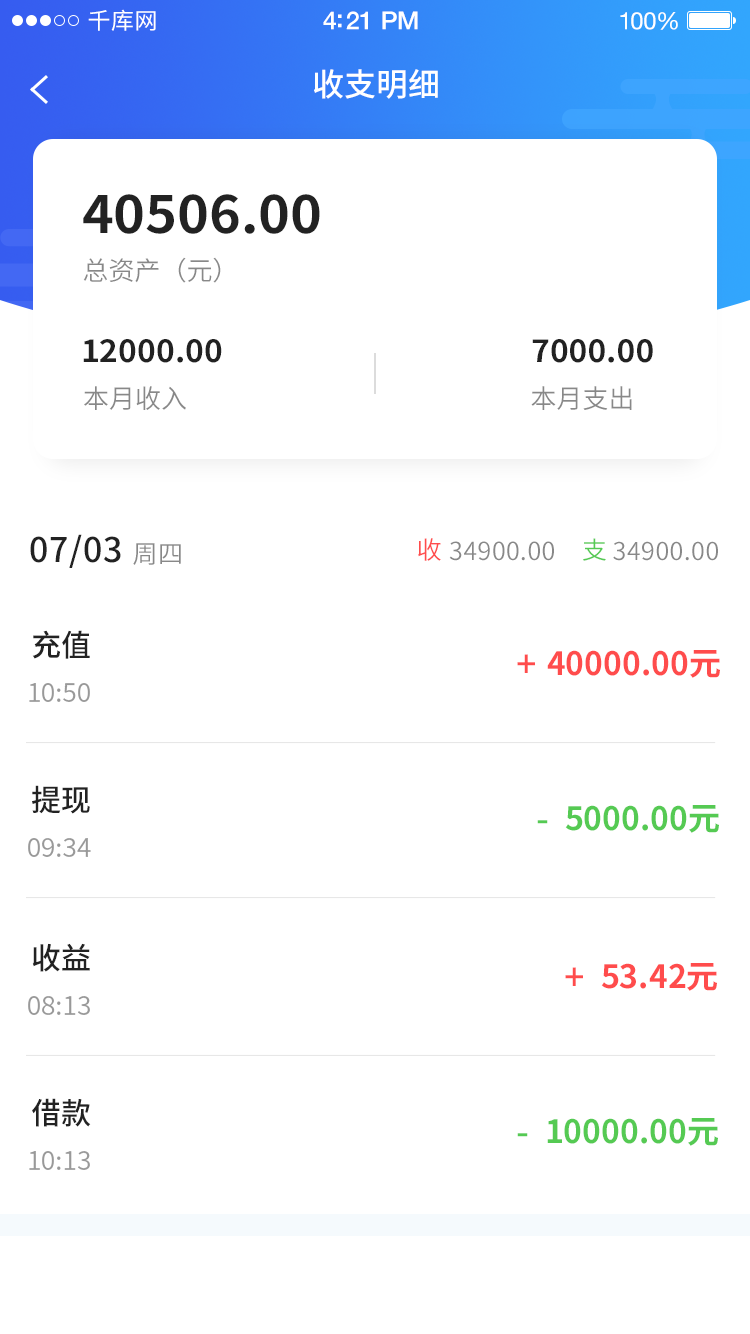
<style>
.page{position:relative;width:750px;height:1334px;background:#ffffff}
.page>*{position:absolute;margin:0}
.t1{font:23px "SourceHanSansCN-Regular";letter-spacing:0.02em;color:#ffffff}
.t2{font:25px "HelveticaNeue-Medium";letter-spacing:-0.02em;color:#ffffff}
.t3{font:24px "HelveticaNeue";letter-spacing:-0.02em;color:#ffffff}
.t4{font:32px "SourceHanSansCN-Medium";color:#ffffff}
.t5{font:51.3px "SourceHanSansCN-Bold";color:#222222;scale:1.05 1}
.t6{font:26px "SourceHanSansCN-Normal";color:#888888}
.t7{font:30.4px "SourceHanSansCN-Bold";color:#222222;scale:1.05 1}
.t8{font:34px "SourceHanSansCN-Medium";letter-spacing:0.02em;color:#222222}
.t9{font:25px "SourceHanSansCN-Normal";letter-spacing:0.02em;color:#888888}
.t10{font:25px "SourceHanSansCN-Normal";letter-spacing:0.02em;color:#ff4c4c}
.t11{font:24.7px "SourceHanSansCN-Normal";letter-spacing:0.02em;color:#55ca53}
.t12{font:24.7px "SourceHanSansCN-Normal";letter-spacing:0.02em;color:#888888}
.t13{font:30px "SourceHanSansCN-Medium";color:#222222}
.t14{font:36px "SourceHanSansCN-Medium";color:#ff4c4c}
.t15{font:32px "SourceHanSansCN-Bold";color:#ff4c4c}
.t16{font:26px "SourceHanSansCN-Normal";color:#999999}
.t17{font:32.1px "SourceHanSansCN-Bold";color:#55ca53}
.t18{font:36.1px "SourceHanSansCN-Medium";color:#55ca53}
.t19{font:30.1px "SourceHanSansCN-Medium";color:#222222}
.t20{font:26.1px "SourceHanSansCN-Normal";color:#999999}
</style>
<div class="page">
<p class="t1" style="left:88px;top:9px;width:68px;height:22px">千库网</p>
<p class="t2" style="left:323px;top:11px;width:95px;height:19px">4:21 PM</p>
<p class="t3" style="left:620px;top:12px;width:58px;height:18px">100%</p>
<p class="t4" style="left:314px;top:69px;width:124px;height:30px">收支明细</p>
<p class="t5" style="left:83px;top:194px;width:237px;height:40px">40506.00</p>
<p class="t6" style="left:83px;top:257px;width:138px;height:26px">总资产（元）</p>
<p class="t7" style="left:83px;top:339px;width:139px;height:24px">12000.00</p>
<p class="t7" style="left:532px;top:339px;width:121px;height:24px">7000.00</p>
<p class="t6" style="left:84px;top:386px;width:102px;height:24px">本月收入</p>
<p class="t6" style="left:531px;top:386px;width:101px;height:24px">本月支出</p>
<p class="t8" style="left:30px;top:534px;width:91px;height:34px">07/03</p>
<p class="t9" style="left:133px;top:543px;width:48px;height:22px">周四</p>
<p class="t10" style="left:418px;top:538px;width:23px;height:23px">收</p>
<p class="t9" style="left:449px;top:541px;width:105px;height:20px">34900.00</p>
<p class="t11" style="left:583px;top:538px;width:23px;height:23px">支</p>
<p class="t12" style="left:613px;top:541px;width:105px;height:20px">34900.00</p>
<p class="t13" style="left:32px;top:630px;width:58px;height:29px">充值</p>
<p class="t14" style="left:517px;top:654px;width:18px;height:19px">+</p>
<p class="t15" style="left:547px;top:650px;width:173px;height:28px">40000.00元</p>
<p class="t16" style="left:29px;top:683px;width:61px;height:19px">10:50</p>
<p class="t13" style="left:32px;top:785px;width:58px;height:29px">提现</p>
<p class="t17" style="left:565px;top:805px;width:154px;height:28px">5000.00元</p>
<p class="t18" style="left:537px;top:820px;width:11px;height:4px">-</p>
<p class="t16" style="left:28px;top:838px;width:63px;height:19px">09:34</p>
<p class="t13" style="left:32px;top:943px;width:58px;height:29px">收益</p>
<p class="t15" style="left:601px;top:963px;width:116px;height:28px">53.42元</p>
<p class="t14" style="left:565px;top:967px;width:18px;height:19px">+</p>
<p class="t16" style="left:28px;top:996px;width:62px;height:19px">08:13</p>
<p class="t19" style="left:32px;top:1098px;width:59px;height:29px">借款</p>
<p class="t17" style="left:547px;top:1118px;width:171px;height:28px">10000.00元</p>
<p class="t18" style="left:517px;top:1133px;width:11px;height:4px">-</p>
<p class="t20" style="left:29px;top:1151px;width:61px;height:19px">10:13</p>
</div>
